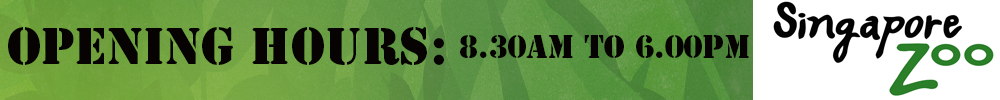
<style>
.page{position:relative;width:1000px;height:100px}
.page>*{position:absolute;margin:0}
.t1{font:48px "StencilStd";color:#060302}
.t2{font:30px "StencilStd";color:#060302}
</style>
<div class="page">
<p class="t1" style="left:8px;top:27px;width:436px;height:38px">Opening Hours:</p>
<p class="t2" style="left:460px;top:35px;width:289px;height:23px">8.30am to 6.00pm</p>
</div>
